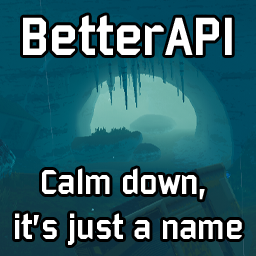
<style>
.page{position:relative;width:256px;height:256px}
.page>*{position:absolute;margin:0}
.t1{font:58.3px "Bombardier";color:#ffffff}
.t2{font:37.5px "Bombardier";color:#ffffff}
</style>
<div class="page">
<p class="t1" style="left:23px;top:15px;width:209px;height:40px">BetterAPI</p>
<p class="t2" style="left:15px;top:168px;width:227px;height:77px;text-align:center">Calm down, <br>it’s just a name</p>
</div>
